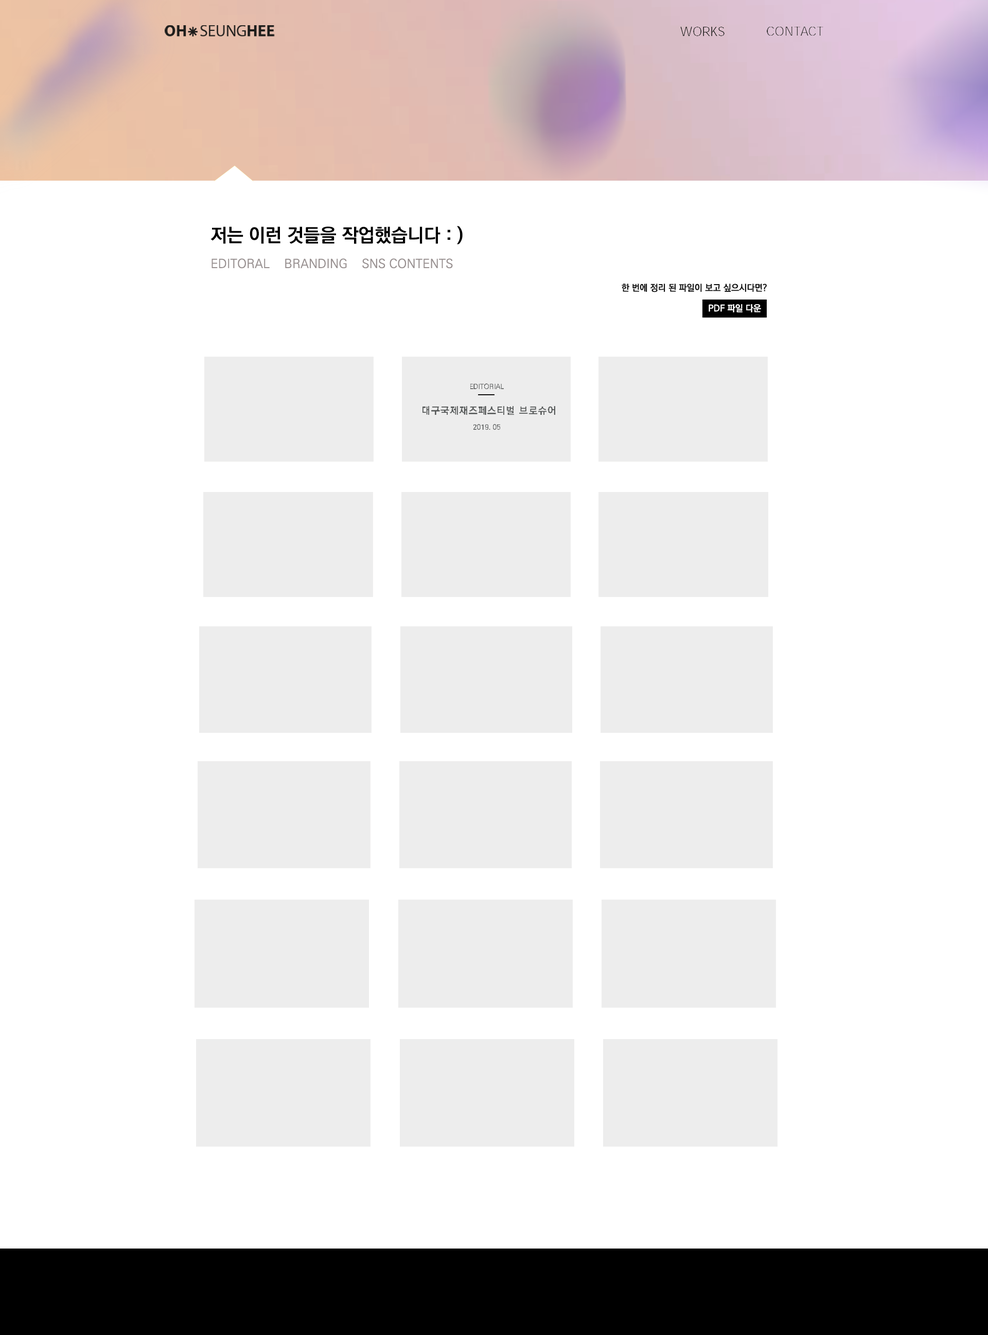
<style>
.page{position:relative;width:988px;height:1335px;background:#ffffff}
.page>*{position:absolute;margin:0}
.t1{font:18.8px "KoPubWorldDotumPB";color:#000000}
.t2{font:12.4px "KoPubWorldDotumPM";color:#999191}
.t3{font:9px "KoPubWorldDotumPB";color:#121212}
.t4{font:8.9px "KoPubWorldDotumPB";color:#ffffff}
.t5{font:7px "KoPubWorldDotumMedium";color:#545757}
.t6{font:9.8px "KoPubWorldDotumBold";letter-spacing:0.1em;color:#545757}
</style>
<div class="page">
<p class="t1" style="left:210px;top:226px;width:253px;height:18px">저는 이런 것들을 작업했습니다 : )</p>
<p class="t2" style="left:211px;top:258px;width:242px;height:11px">EDITORAL    BRANDING    SNS CONTENTS</p>
<p class="t3" style="left:622px;top:284px;width:145px;height:8px">한 번에 정리 된 파일이 보고 싶으시다면?</p>
<p class="t4" style="left:709px;top:304px;width:52px;height:8px">PDF 파일 다운</p>
<p class="t5" style="left:470px;top:383px;width:34px;height:6px">EDITORIAL</p>
<p class="t6" style="left:422px;top:406px;width:133px;height:9px">대구국제재즈페스티벌 브로슈어</p>
<p class="t5" style="left:473px;top:424px;width:27px;height:6px">2019. 05</p>
</div>
